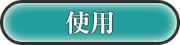
<style>
.page{position:relative;width:180px;height:45px}
.page>*{position:absolute;margin:0}
.t1{font:25px "RyuminPr6N-ExBold";color:#fff6f3}
</style>
<div class="page">
<p class="t1" style="left:65px;top:11px;width:48px;height:24px">使用</p>
</div>
